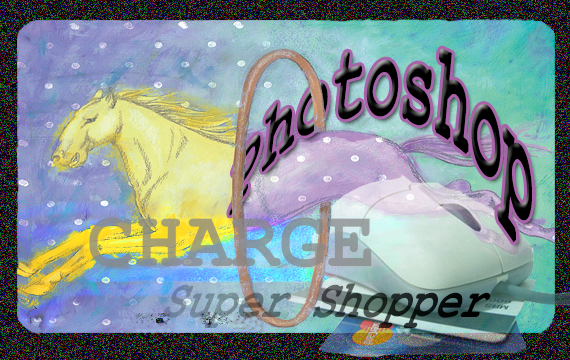
<style>
.page{position:relative;width:570px;height:360px}
.page>*{position:absolute;margin:0}
.t1{font:122.8px "CourierNewPS-BoldItalicMT";color:#000000;scale:0.45 1}
.t2{font:57.7px "CourierNewPS-BoldMT";scale:0.72 1}
</style>
<div class="page">
<p class="t1" style="left:229px;top:48px;width:303px;height:194px">Photoshop</p>
<p class="t2" style="left:162px;top:283px;width:329px;height:45px">Super Shopper</p>
</div>
